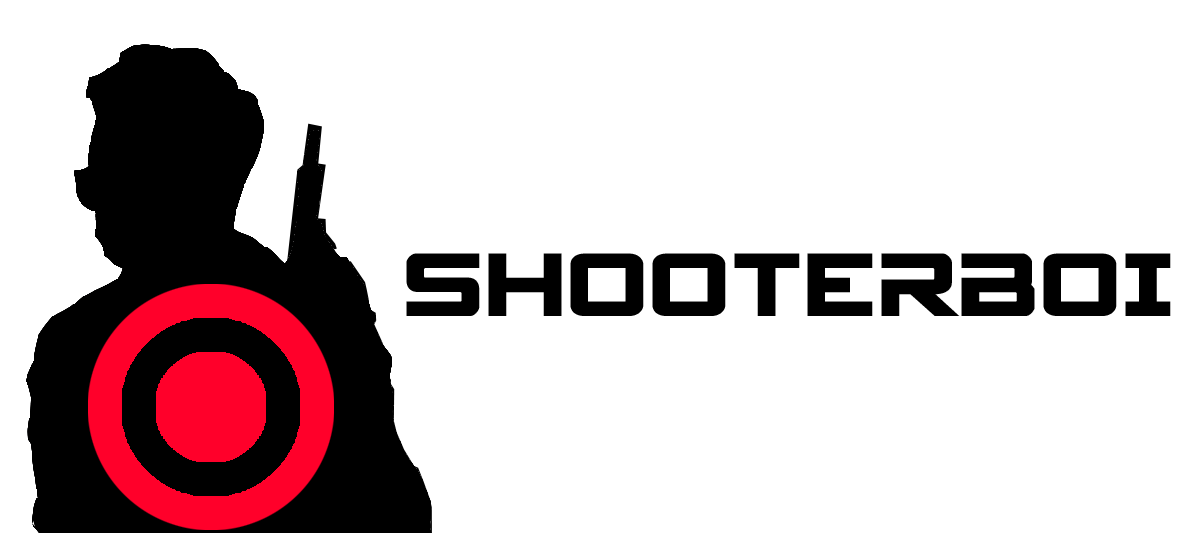
<style>
.page{position:relative;width:1200px;height:533px;background:#ffffff}
.page>*{position:absolute;margin:0}
.t1{font:100px "SpyAgency";color:#000000}
</style>
<div class="page">
<p class="t1" style="left:406px;top:253px;width:765px;height:63px">SHOOTERBOI</p>
</div>
